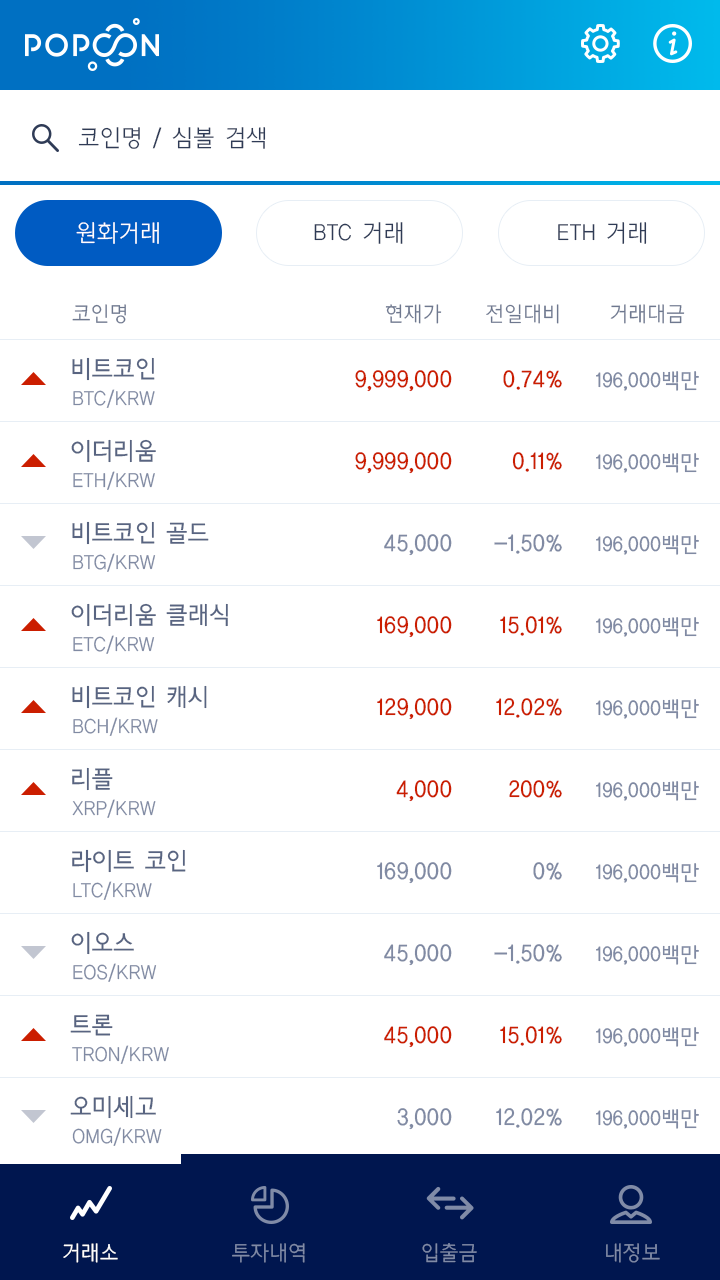
<style>
.page{position:relative;width:720px;height:1280px;background:#ffffff}
.page>*{position:absolute;margin:0}
.t1{font:24px "CreGoL";color:#2f3b56}
.t2{font:24px "CreGoL";color:#ffffff}
.t3{font:21px "CreGoL";color:#6e788f}
.t4{font:24px/82px "CreGoM"}
.t5{font:21px/82px "CreGoM";color:#808aa3}
.t6{font:21px/82px "CreGoL";color:#808aa3}
.t7{font:21px "CreGoL";color:#ffffff}
.t8{font:21px "CreGoL";color:#808ba7}
</style>
<div class="page">
<p class="t1" style="left:78px;top:127px;width:188px;height:22px">코인명 / 심볼 검색</p>
<p class="t2" style="left:76px;top:222px;width:83px;height:22px">원화거래</p>
<p class="t1" style="left:314px;top:222px;width:89px;height:22px">BTC 거래</p>
<p class="t1" style="left:558px;top:222px;width:89px;height:22px">ETH 거래</p>
<p class="t3" style="left:72px;top:304px;width:54px;height:20px">코인명</p>
<p class="t3" style="left:385px;top:304px;width:57px;height:20px">현재가</p>
<p class="t3" style="left:486px;top:304px;width:73px;height:20px">전일대비</p>
<p class="t3" style="left:610px;top:304px;width:75px;height:20px">거래대금</p>
<p class="t4" style="left:355px;top:370px;width:97px;height:760px;text-align:right">9,999,000<br>9,999,000<br>45,000<br>169,000<br>129,000<br>4,000<br>169,000<br>45,000<br>45,000<br>3,000</p>
<p class="t4" style="left:494px;top:370px;width:68px;height:758px;text-align:right">0.74%<br>0.11%<br>-1.50%<br>15.01%<br>12.02%<br>200%<br>0%<br>-1.50%<br>15.01%<br>12.02%</p>
<p class="t5" style="left:596px;top:371px;width:103px;height:758px;text-align:right">196,000백만<br>196,000백만<br>196,000백만<br>196,000백만<br>196,000백만<br>196,000백만<br>196,000백만<br>196,000백만<br>196,000백만<br>196,000백만</p>
<p class="t6" style="left:72px;top:389px;width:97px;height:757px">BTC/KRW<br>ETH/KRW<br>BTG/KRW<br>ETC/KRW<br>BCH/KRW<br>XRP/KRW<br>LTC/KRW<br>EOS/KRW<br>TRON/KRW<br>OMG/KRW</p>
<p class="t7" style="left:63px;top:1243px;width:55px;height:20px">거래소</p>
<p class="t8" style="left:232px;top:1243px;width:73px;height:20px">투자내역</p>
<p class="t8" style="left:422px;top:1243px;width:55px;height:20px">입출금</p>
<p class="t8" style="left:606px;top:1243px;width:54px;height:20px">내정보</p>
</div>
